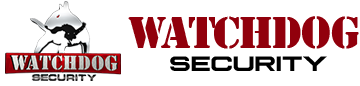
<style>
.page{position:relative;width:360px;height:86px;background:#ffffff}
.page>*{position:absolute;margin:0}
.t1{font:46.7px "Stencil";letter-spacing:-0.05em;color:#91000c}
.t2{font:46.7px "Stencil";letter-spacing:-0.1em;color:#91000c}
.t3{font:46.7px "Stencil";color:#91000c}
.t4{font:21.7px "Plateia-Bold";color:#000000}
</style>
<div class="page">
<p class="t1" style="left:128px;top:16px;width:231px;height:33px"><span class="t2">W</span>ATCH<span class="t3">DO</span>G</p>
<p class="t4" style="left:170px;top:56px;width:157px;height:15px">SECURITY</p>
</div>
